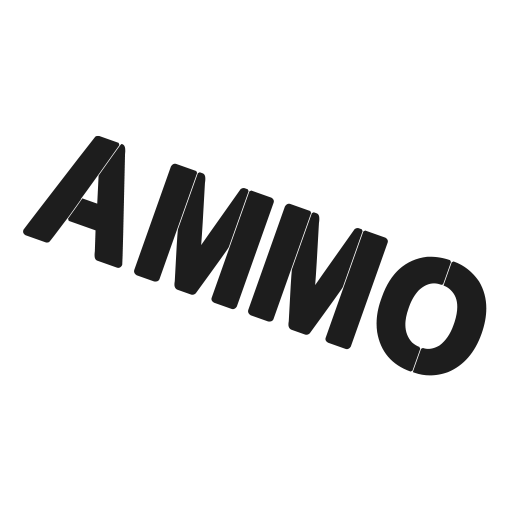
<style>
.page{position:relative;width:512px;height:512px;background:#ffffff}
.page>*{position:absolute;margin:0}
.t1{font:151.7px "NewStenciltfb";color:#1d1d1d;font-variant:small-caps;font-weight:bold}
</style>
<div class="page">
<p class="t1" style="left:23px;top:135px;width:464px;height:241px;rotate:20deg">ammo</p>
</div>
